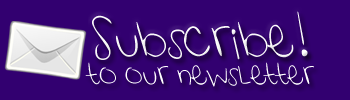
<style>
.page{position:relative;width:350px;height:100px;background:#320070}
.page>*{position:absolute;margin:0}
.t1{font:30px "ShiningLikeStars";color:#ffffff;scale:0.96 1}
.t2{font:18px "ShiningLikeStars";color:#ffffff;scale:0.96 1}
</style>
<div class="page">
<p class="t1" style="left:92px;top:11px;width:216px;height:49px">Subscribe!</p>
<p class="t2" style="left:85px;top:62px;width:229px;height:25px">to our newsLetter</p>
</div>
